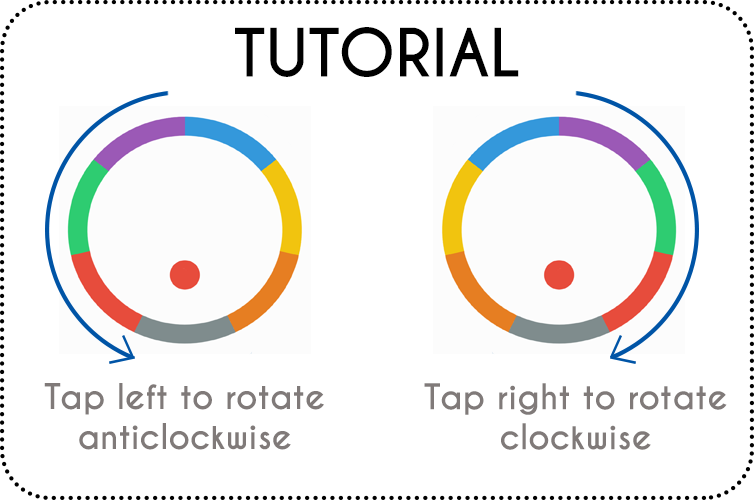
<style>
.page{position:relative;width:754px;height:500px;background:#ffffff}
.page>*{position:absolute;margin:0}
.t1{font:62.5px "CaviarDreams-Bold";color:#000000}
.t2{font:33.3px "CaviarDreams-Bold";color:#807a79}
</style>
<div class="page">
<p class="t1" style="left:235px;top:27px;width:284px;height:50px">TUTORIAL</p>
<p class="t2" style="left:44px;top:383px;width:280px;height:67px;text-align:center">Tap left to rotate<br>anticlockwise</p>
<p class="t2" style="left:424px;top:383px;width:303px;height:67px;text-align:center">Tap right to rotate<br>clockwise</p>
</div>
